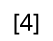
<style>
.page{position:relative;width:53px;height:41px;background:#ffffff}
.page>*{position:absolute;margin:0}
.t1{font:23.7px "DroidSans";color:#000000}
</style>
<div class="page">
<p class="t1" style="left:14px;top:13px;width:25px;height:22px">[4]</p>
</div>
